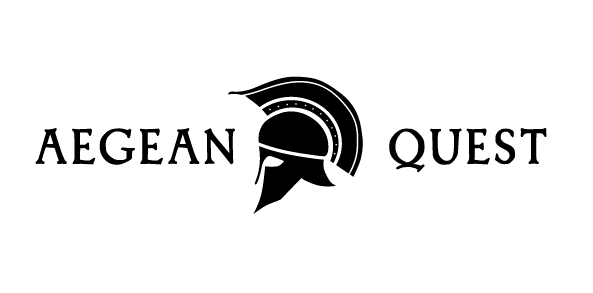
<style>
.page{position:relative;width:593px;height:293px;background:#ffffff}
.page>*{position:absolute;margin:0}
.t1{font:46.7px "Treglonou";letter-spacing:0.075em;color:#000000;font-weight:bold}
</style>
<div class="page">
<p class="t1" style="left:35px;top:128px;width:512px;height:45px">AEGEAN        QUEST</p>
</div>
